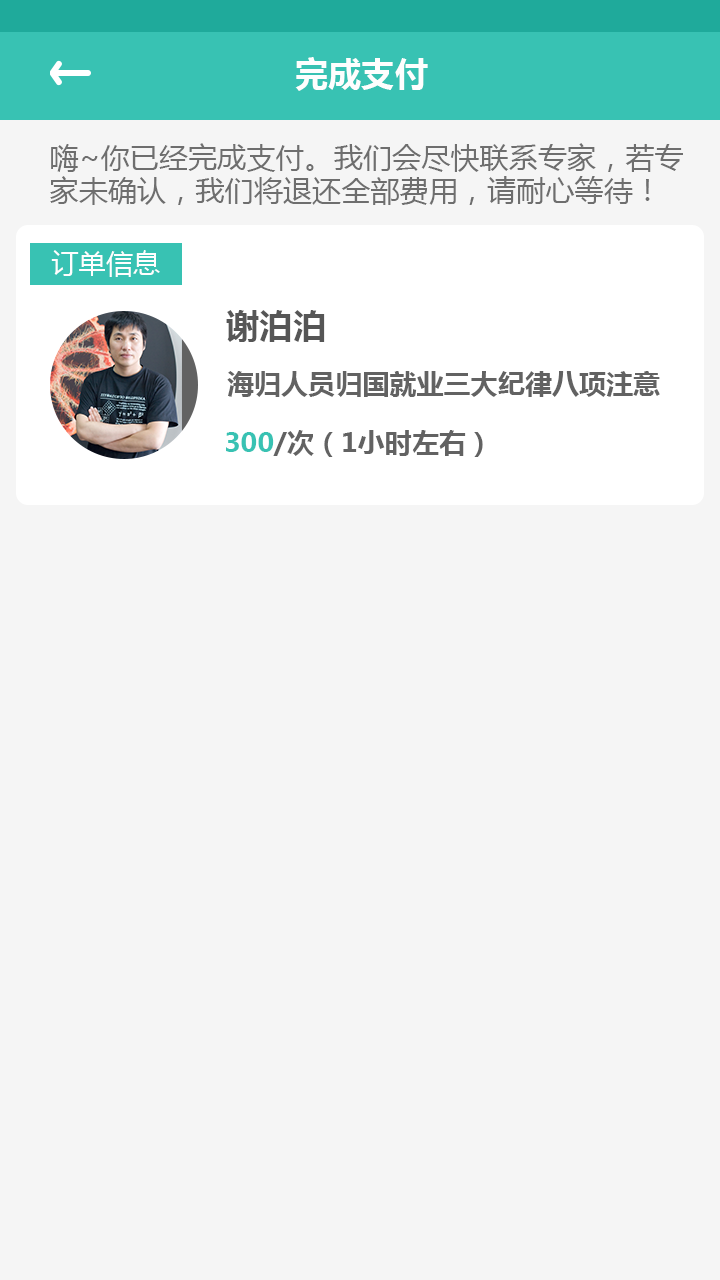
<style>
.page{position:relative;width:720px;height:1280px;background:#f5f5f5}
.page>*{position:absolute;margin:0}
.t1{font:33.3px "MicrosoftYaHei-Bold";color:#fefefe}
.t2{font:29.2px/33.3px "MicrosoftYaHei";color:#6e6e6e}
.t3{font:27.1px "MicrosoftYaHei";color:#fefefe}
.t4{font:33.3px "MicrosoftYaHei-Bold";color:#565656}
.t5{font:27.1px "MicrosoftYaHei-Bold";color:#626262}
.t6{font:27.1px "MicrosoftYaHei-Bold";color:#38c2b3}
</style>
<div class="page">
<p class="t1" style="left:295px;top:57px;width:133px;height:34px">完成支付</p>
<p class="t2" style="left:50px;top:143px;width:633px;height:62px">嗨~你已经完成支付。我们会尽快联系专家，若专<br>家未确认，我们将退还全部费用，请耐心等待！</p>
<p class="t3" style="left:51px;top:250px;width:109px;height:27px">订单信息</p>
<p class="t4" style="left:226px;top:310px;width:99px;height:32px">谢泊泊</p>
<p class="t5" style="left:227px;top:371px;width:433px;height:26px">海归人员归国就业三大纪律八项注意</p>
<p class="t5" style="left:226px;top:430px;width:257px;height:27px"><span class="t6">300</span>/次（1小时左右）</p>
</div>
